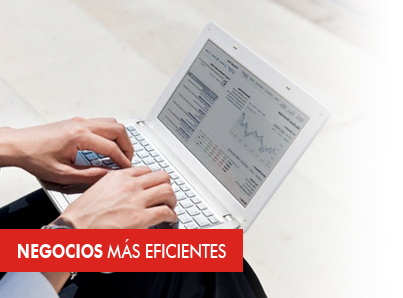
<style>
.page{position:relative;width:403px;height:298px}
.page>*{position:absolute;margin:0}
.t1{font:20px "FuturaBT-Medium";letter-spacing:-0.025em;color:#ffffff;scale:0.8 1}
.t2{font:20px "FuturaBT-Bold";letter-spacing:-0.025em;color:#ffffff;scale:0.8 1}
</style>
<div class="page">
<p class="t1" style="left:18px;top:239px;width:208px;height:19px"><span class="t2">NEGOCIOS </span>MÁS EFICIENTES</p>
</div>
